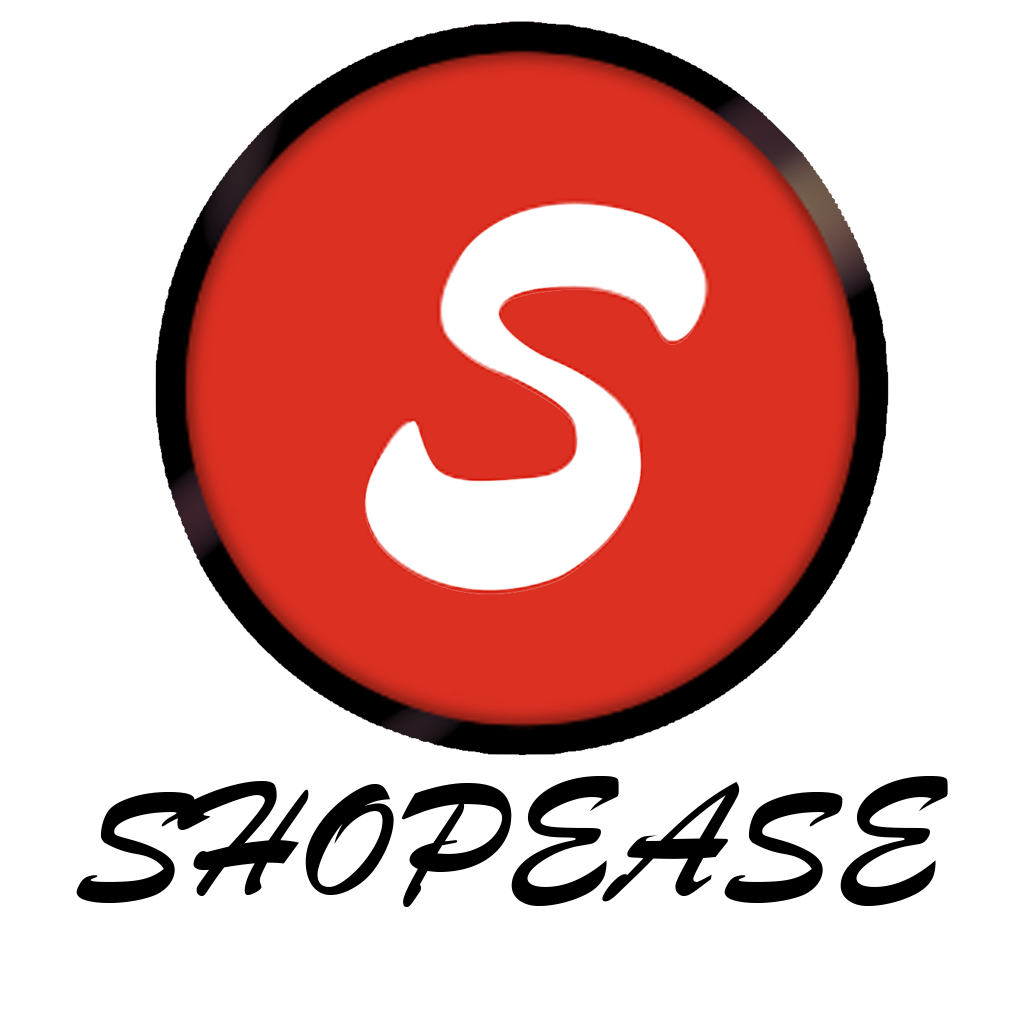
<style>
.page{position:relative;width:1024px;height:1024px;background:#ffffff}
.page>*{position:absolute;margin:0}
.t1{font:173.3px "BrushScriptMT";color:#000000}
</style>
<div class="page">
<p class="t1" style="left:76px;top:776px;width:872px;height:131px">SHOPEASE</p>
</div>
